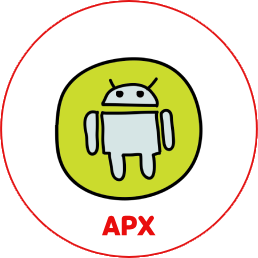
<style>
.page{position:relative;width:258px;height:258px;background:#ffffff}
.page>*{position:absolute;margin:0}
.t1{font:24px "Jalnan";color:#e90d0d}
</style>
<div class="page">
<p class="t1" style="left:102px;top:215px;width:54px;height:21px">APX</p>
</div>
